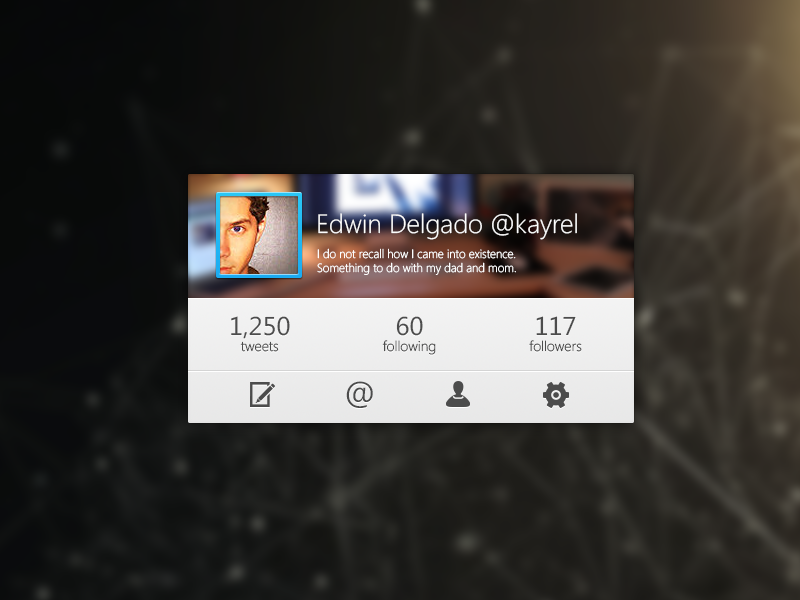
<style>
.page{position:relative;width:800px;height:600px}
.page>*{position:absolute;margin:0}
.t1{font:26.6px "Segoe-Light";color:#fdfdfd}
.t2{font:12px "Segoe-Light";color:#fdfdfd}
.t3{font:25.7px "Segoe";color:#4c4c4c}
.t4{font:14px "Segoe-Light";color:#4c4c4c}
.t5{font:33px "Segoe";color:#4c4c4c}
</style>
<div class="page">
<p class="t1" style="left:318px;top:213px;width:259px;height:27px">Edwin Delgado @kayrel</p>
<p class="t2" style="left:317px;top:248px;width:199px;height:27px">I do not recall how I came into existence. <br>Something to do with my dad and mom.</p>
<p class="t3" style="left:231px;top:316px;width:59px;height:23px">1,250</p>
<p class="t3" style="left:396px;top:316px;width:27px;height:20px">60</p>
<p class="t3" style="left:536px;top:316px;width:40px;height:20px">117</p>
<p class="t4" style="left:240px;top:341px;width:39px;height:11px">tweets</p>
<p class="t4" style="left:382px;top:340px;width:54px;height:15px">following</p>
<p class="t4" style="left:529px;top:340px;width:53px;height:12px">followers</p>
<p class="t5" style="left:346px;top:381px;width:27px;height:27px">@</p>
</div>
